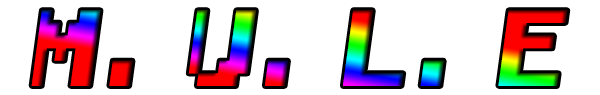
<style>
.page{position:relative;width:600px;height:95px;background:#ffffff}
.page>*{position:absolute;margin:0}
.t1{font:101px "Early-GameBoy";font-style:italic;scale:0.77 1}
</style>
<div class="page">
<p class="t1" style="left:31px;top:10px;width:537px;height:76px">M.U.L.E</p>
</div>
